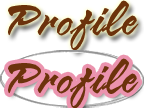
<style>
.page{position:relative;width:144px;height:108px;background:#ffffff}
.page>*{position:absolute;margin:0}
.t1{font:35px "VNI-Butlong";color:#6c320c}
</style>
<div class="page">
<p class="t1" style="left:8px;top:0px;width:131px;height:51px">Profile</p>
<p class="t1" style="left:8px;top:58px;width:131px;height:51px">Profile</p>
</div>
